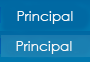
<style>
.page{position:relative;width:90px;height:62px;background:#0069a3}
.page>*{position:absolute;margin:0}
.t1{font:13.8px "CenturyGothic";color:#f7f7f7}
</style>
<div class="page">
<p class="t1" style="left:17px;top:11px;width:56px;height:13px">Principal</p>
<p class="t1" style="left:16px;top:41px;width:56px;height:13px">Principal</p>
</div>
